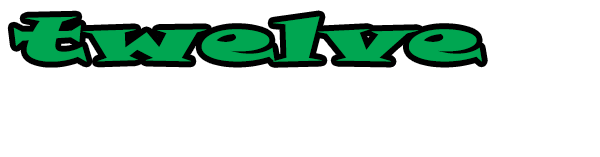
<style>
.page{position:relative;width:600px;height:157px;background:#ffffff}
.page>*{position:absolute;margin:0}
.t1{font:60px "SnapITC-Regular";color:#00a651;scale:2 1}
</style>
<div class="page">
<p class="t1" style="left:13px;top:16px;width:469px;height:46px">twelve</p>
</div>
